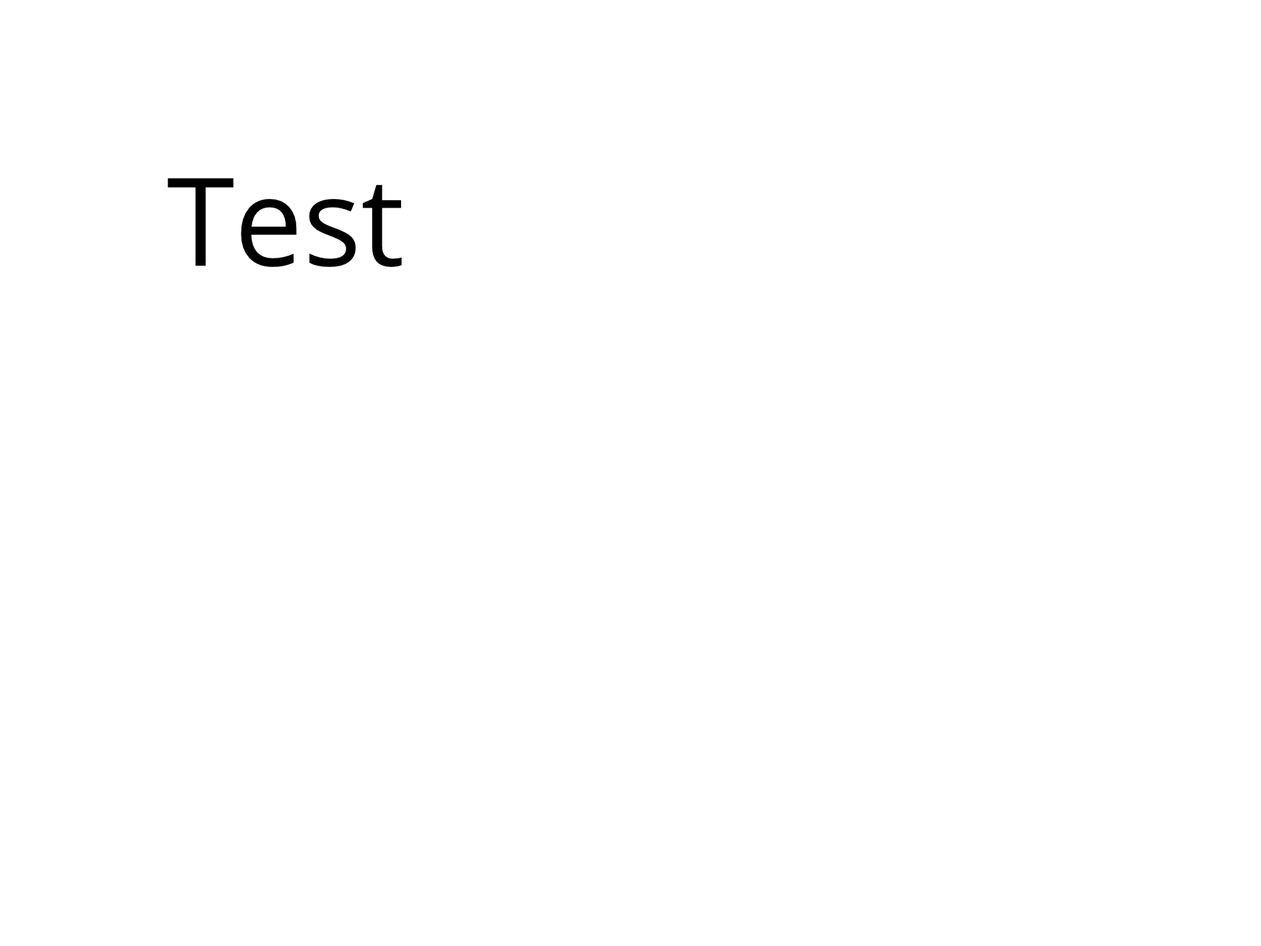
<style>
.page{position:relative;width:1261px;height:946px;background:#ffffff}
.page>*{position:absolute;margin:0}
.t1{font:122.3px "OpenSans";color:#000000}
</style>
<div class="page">
<p class="t1" style="left:167px;top:178px;width:235px;height:89px">Test</p>
</div>
